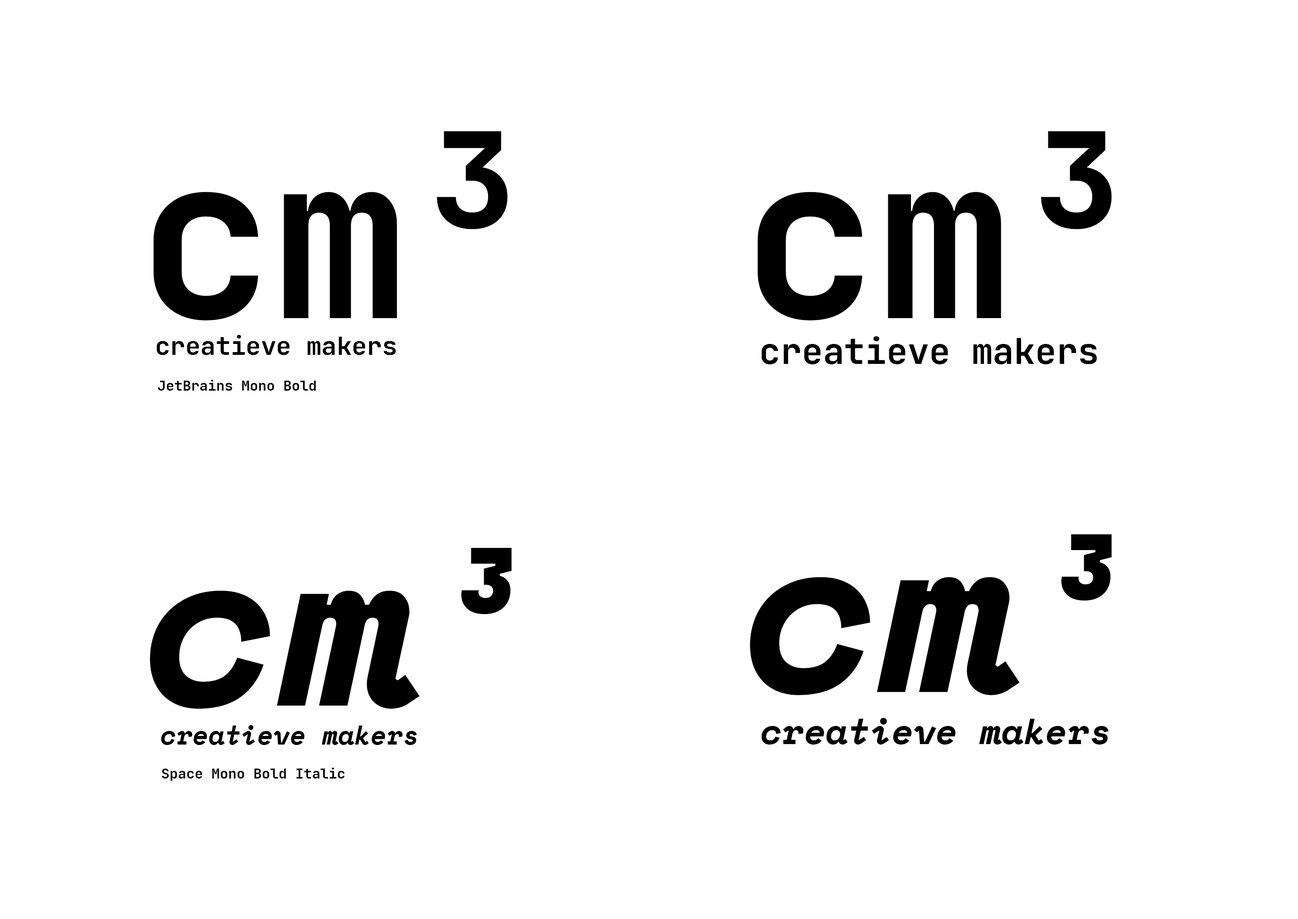
<style>
.page{position:relative;width:1298px;height:919px;background:#ffffff}
.page>*{position:absolute;margin:0}
.t1{font:225.3px "JetBrainsMonoNL-Bold";color:#000000}
.t2{font:25.2px "JetBrainsMonoNL-Bold";color:#000000}
.t3{font:35.4px "JetBrainsMonoNL-Bold";color:#000000}
.t4{font:14px "JetBrainsMonoNL-Bold";color:#000000}
.t5{font:225.3px "SpaceMono-BoldItalic";color:#000000}
.t6{font:26.4px "SpaceMono-BoldItalic";color:#000000}
.t7{font:35.8px "SpaceMono-BoldItalic";color:#000000}
</style>
<div class="page">
<p class="t1" style="left:153px;top:131px;width:354px;height:189px">cm³</p>
<p class="t1" style="left:757px;top:131px;width:354px;height:189px">cm³</p>
<p class="t2" style="left:156px;top:335px;width:240px;height:20px">creatieve makers</p>
<p class="t3" style="left:761px;top:336px;width:336px;height:28px">creatieve makers</p>
<p class="t4" style="left:158px;top:380px;width:158px;height:11px">JetBrains Mono Bold</p>
<p class="t5" style="left:749px;top:534px;width:362px;height:161px">cm³</p>
<p class="t5" style="left:150px;top:548px;width:362px;height:161px">cm³</p>
<p class="t6" style="left:161px;top:725px;width:256px;height:20px">creatieve makers</p>
<p class="t7" style="left:761px;top:718px;width:347px;height:26px">creatieve makers</p>
<p class="t4" style="left:162px;top:768px;width:182px;height:13px">Space Mono Bold Italic</p>
</div>
